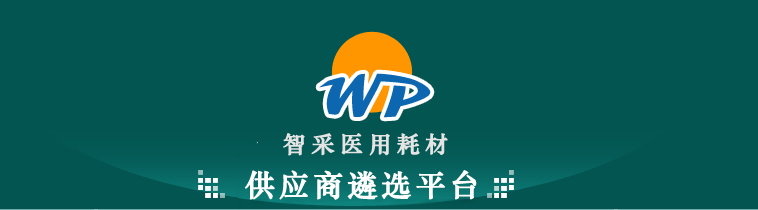
<style>
.page{position:relative;width:758px;height:210px;background:#035551}
.page>*{position:absolute;margin:0}
.t1{font:42.7px "Magneto-Bold";color:#0c67b0}
.t2{font:23px "STZhongsong";letter-spacing:0.21em;color:#e4e4e4;font-weight:bold}
.t3{font:30px "STZhongsong";letter-spacing:0.11em;color:#ffffff;font-weight:bold}
</style>
<div class="page">
<p class="t1" style="left:319px;top:73px;width:112px;height:45px">WP</p>
<p class="t2" style="left:283px;top:133px;width:165px;height:23px">智采医用耗材</p>
<p class="t3" style="left:245px;top:170px;width:232px;height:30px">供应商遴选平台</p>
</div>
